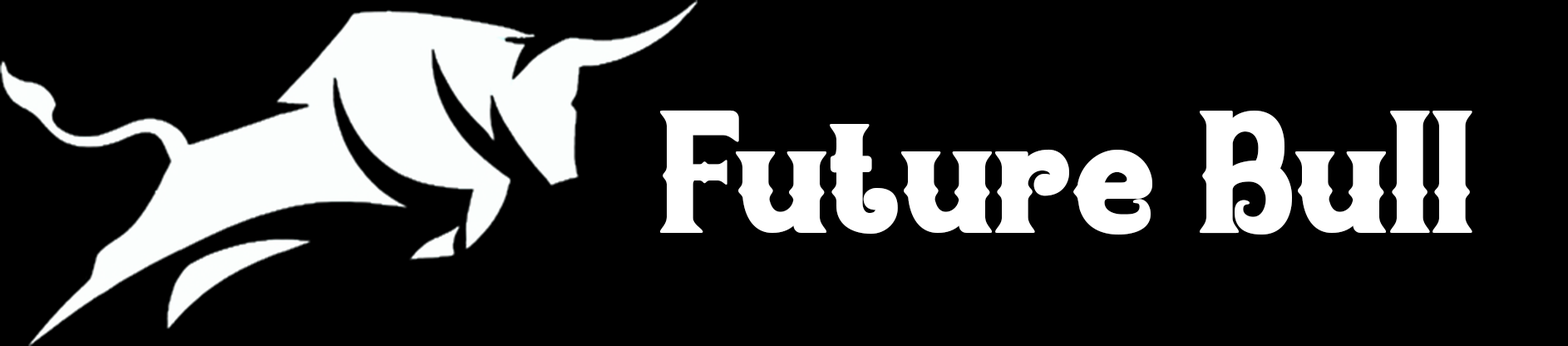
<style>
.page{position:relative;width:1568px;height:346px;background:#000000}
.page>*{position:absolute;margin:0}
.t1{font:163px "FIRWAEN-Regular";color:#ffffff}
</style>
<div class="page">
<p class="t1" style="left:659px;top:110px;width:813px;height:124px">Future Bull</p>
</div>
